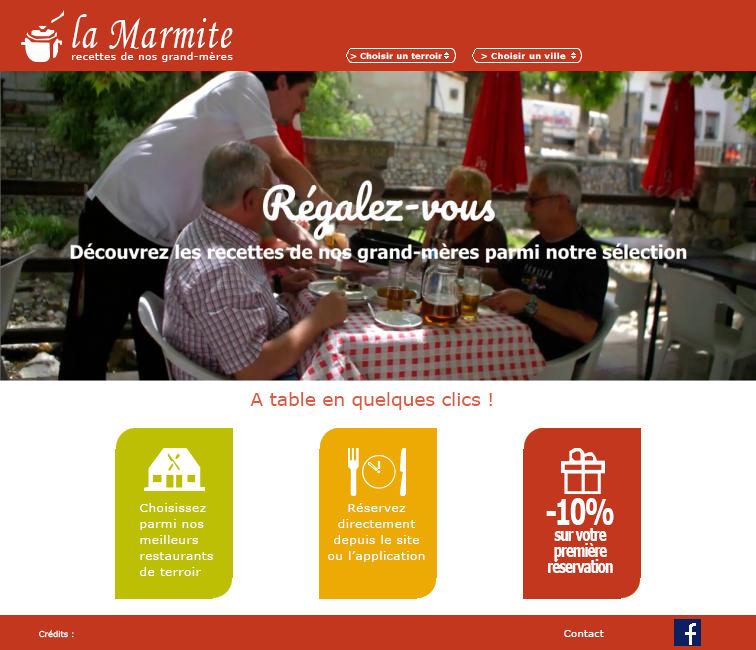
<style>
.page{position:relative;width:756px;height:650px;background:#ffffff}
.page>*{position:absolute;margin:0}
.t1{font:49.3px "MonotypeCorsiva";letter-spacing:0.05em;color:#ffffff;scale:0.74 1}
.t2{font:10px "Verdana";letter-spacing:0.05em;color:#ffffff}
.t3{font:8px "Verdana-Bold";letter-spacing:0.025em;color:#ffffff}
.t4{font:8px "Verdana-Bold";letter-spacing:0.05em;color:#ffffff}
.t5{font:18px "Verdana";color:#d85d45;scale:1.03 1}
.t6{font:10.8px/16px "Verdana";letter-spacing:0.025em;color:#ffffff;scale:1.14 1}
.t7{font:18px/16px "Verdana-Bold";letter-spacing:-0.1em;color:#ffffff;scale:0.68 1}
.t8{font:36px/16px "Verdana-Bold";letter-spacing:-0.1em;color:#ffffff;scale:0.68 1}
.t9{font:8px "Verdana";color:#fefefe;scale:1.03 1}
.t10{font:10px "Verdana";letter-spacing:0.005em;color:#fefefe;scale:1.03 1}
</style>
<div class="page">
<p class="t1" style="left:72px;top:14px;width:161px;height:35px">la Marmite</p>
<p class="t2" style="left:72px;top:52px;width:161px;height:10px">recettes de nos grand-mères</p>
<p class="t3" style="left:350px;top:52px;width:92px;height:8px">&gt; Choisir un terroir</p>
<p class="t4" style="left:481px;top:52px;width:85px;height:8px">&gt; Choisir un ville</p>
<p class="t5" style="left:250px;top:392px;width:242px;height:18px">A table en quelques clics !</p>
<p class="t6" style="left:140px;top:503px;width:73px;height:73px">Choisissez<br>parmi nos<br>meilleurs<br>restaurants<br>de terroir</p>
<p class="t6" style="left:328px;top:503px;width:97px;height:59px;text-align:center">Réservez<br>directement<br>depuis le site<br>ou l’application</p>
<p class="t7" style="left:546px;top:498px;width:68px;height:75px;text-align:center"><span class="t8">-10%<br></span>sur votre<br>première<br>réservation</p>
<p class="t9" style="left:39px;top:630px;width:35px;height:8px">Crédits :</p>
<p class="t10" style="left:564px;top:630px;width:40px;height:7px">Contact</p>
</div>
